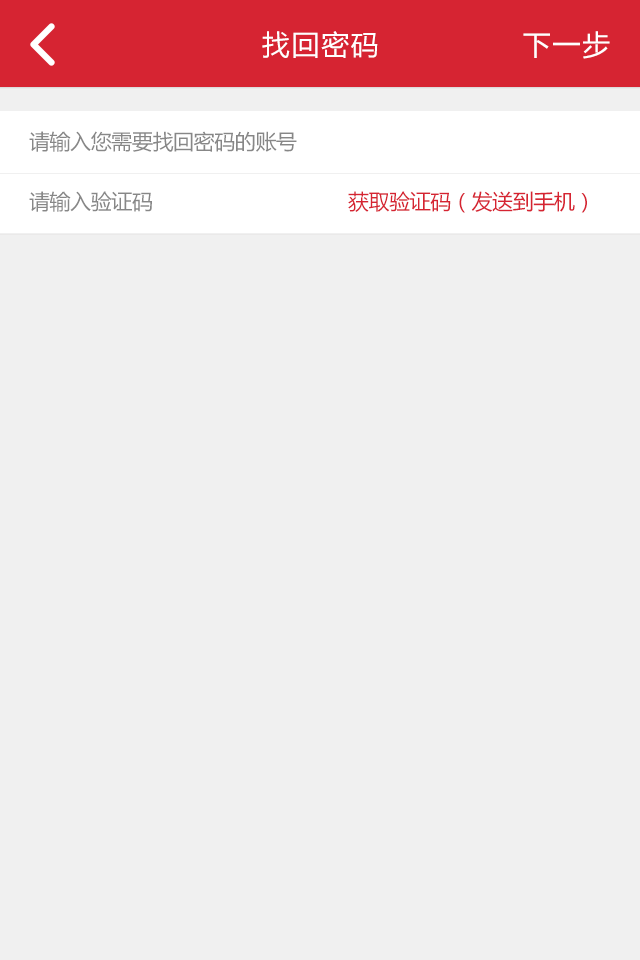
<style>
.page{position:relative;width:640px;height:960px;background:#f0f0f0}
.page>*{position:absolute;margin:0}
.t1{font:28px "MicrosoftYaHei";letter-spacing:0.06em;color:#ffffff}
.t2{font:21px "MicrosoftYaHei";letter-spacing:-0.02em;color:#878787}
.t3{font:21px "MicrosoftYaHei";letter-spacing:-0.02em;color:#d62432}
</style>
<div class="page">
<p class="t1" style="left:262px;top:31px;width:116px;height:27px">找回密码</p>
<p class="t1" style="left:523px;top:31px;width:87px;height:28px">下一步</p>
<p class="t2" style="left:29px;top:131px;width:268px;height:21px">请输入您需要找回密码的账号</p>
<p class="t2" style="left:29px;top:191px;width:123px;height:21px">请输入验证码</p>
<p class="t3" style="left:348px;top:191px;width:239px;height:22px">获取验证码（发送到手机）</p>
</div>
